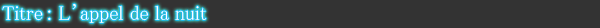
<style>
.page{position:relative;width:600px;height:28px;background:#333333}
.page>*{position:absolute;margin:0}
.t1{font:20px "MS-PMincho";color:#ffffff}
</style>
<div class="page">
<p class="t1" style="left:2px;top:3px;width:205px;height:20px">Titre : L’appel de la nuit</p>
</div>
